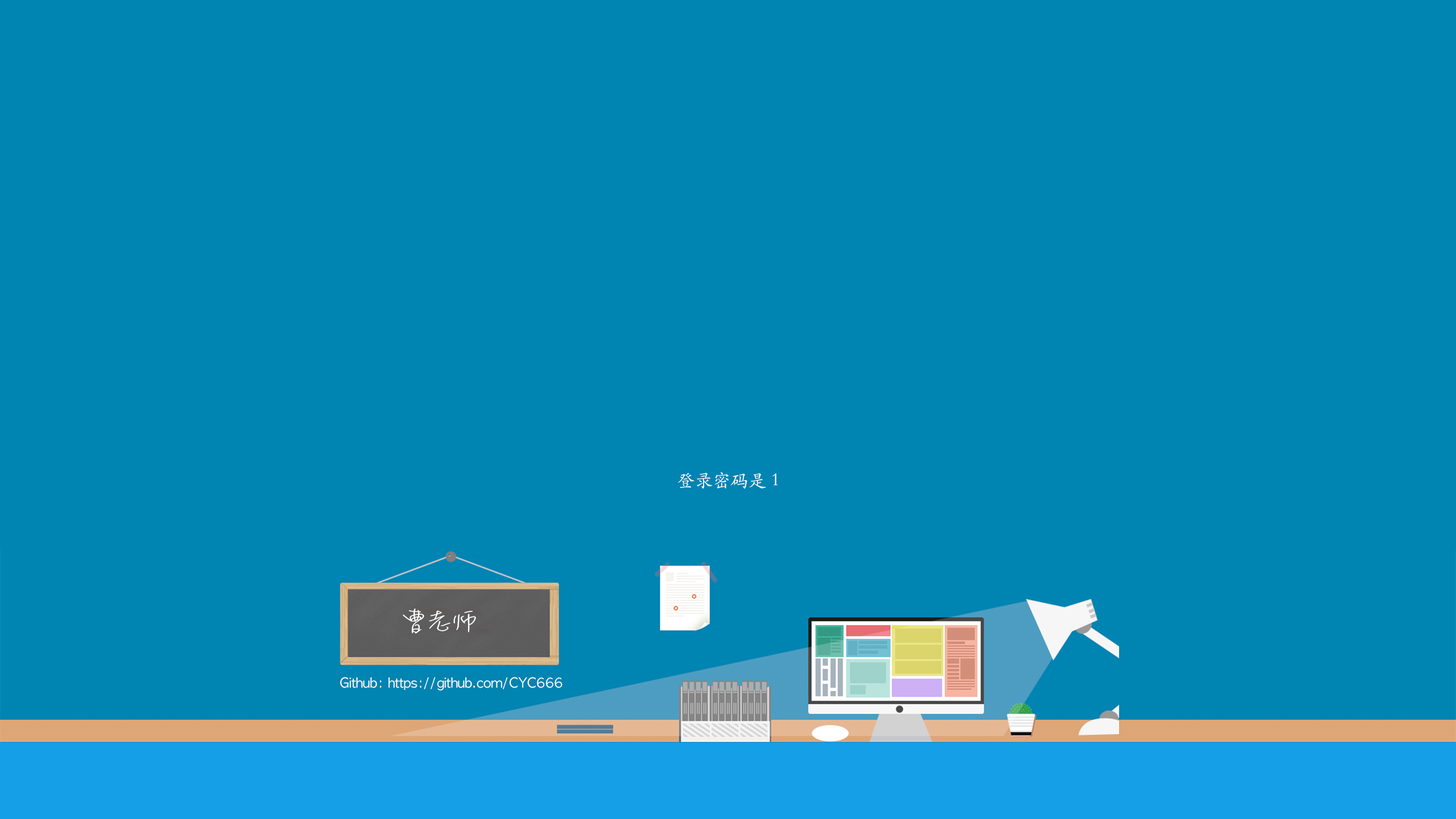
<style>
.page{position:relative;width:1456px;height:819px;background:#0084b2}
.page>*{position:absolute;margin:0}
.t1{font:18.5px "STKaitiTC-Regular";color:#ffffff}
.t2{font:28.8px "MLingWaiMedium-SC";color:#ffffff;scale:1.37 1}
.t3{font:13px "AppleGothic";color:#ffffff}
</style>
<div class="page">
<p class="t1" style="left:678px;top:472px;width:100px;height:17px">登录密码是 1</p>
<p class="t2" style="left:403px;top:609px;width:73px;height:25px">曹老师</p>
<p class="t3" style="left:340px;top:677px;width:222px;height:13px">Github: https://github.com/CYC666</p>
</div>
